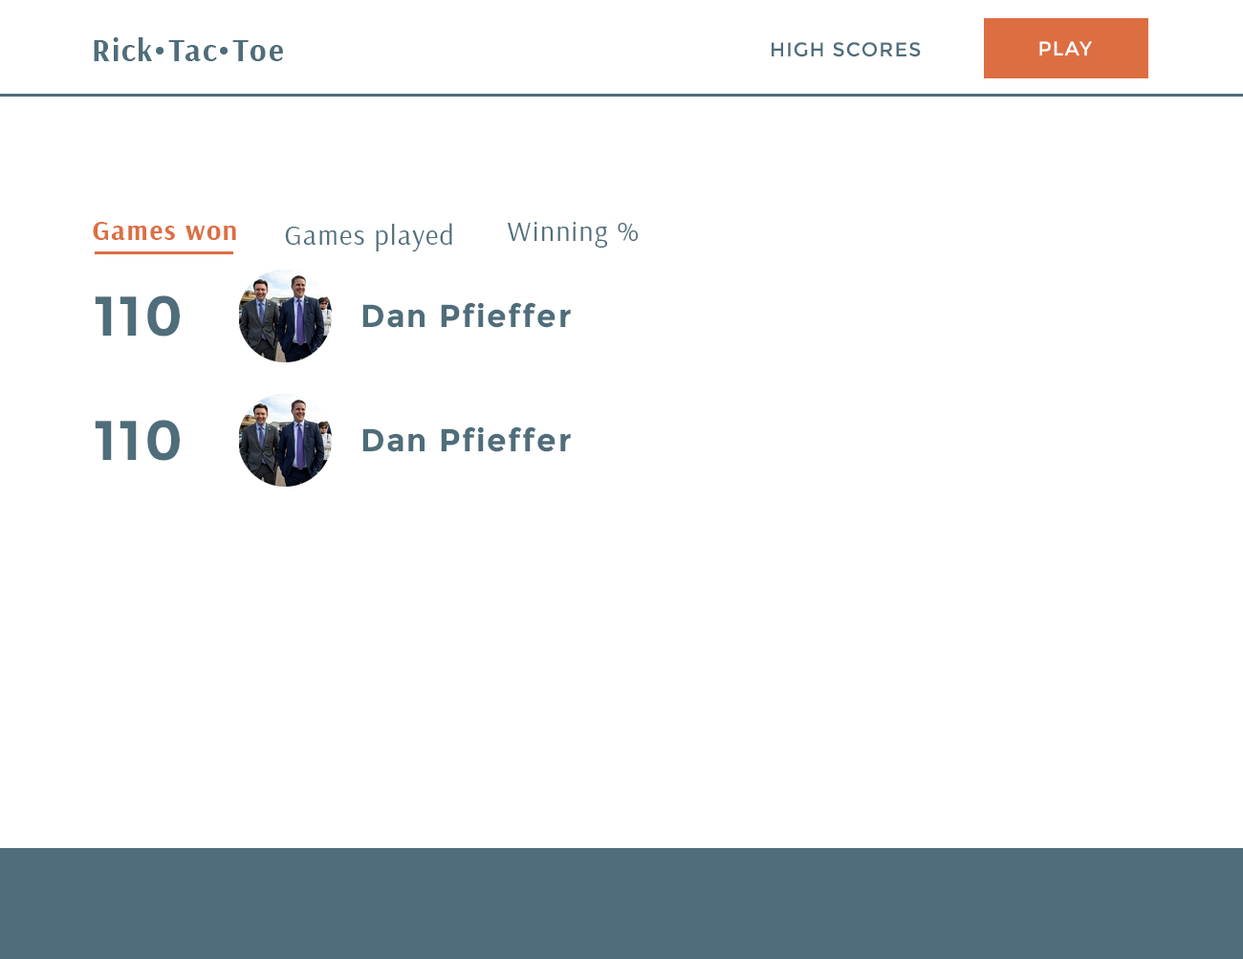
<style>
.page{position:relative;width:1243px;height:959px;background:#ffffff}
.page>*{position:absolute;margin:0}
.t1{font:31.9px "Arsenal-Bold";letter-spacing:0.05em;color:#4f6d7a}
.t2{font:19.9px "Montserrat-Regular";letter-spacing:0.05em;color:#ffffff}
.t3{font:19.9px "Montserrat-Regular";letter-spacing:0.05em;color:#4f6d7a}
.t4{font:27.9px "Arsenal-Bold";letter-spacing:0.05em;color:#dd6e42}
.t5{font:27.9px "Arsenal-Regular";letter-spacing:0.05em;color:#4f6d7a}
.t6{font:55.8px "Montserrat-Bold";letter-spacing:0.05em;color:#4f6d7a}
.t7{font:31.9px "Montserrat-Bold";letter-spacing:0.05em;color:#4f6d7a}
</style>
<div class="page">
<p class="t1" style="left:94px;top:37px;width:189px;height:24px">Rick•Tac•Toe</p>
<p class="t2" style="left:1039px;top:41px;width:53px;height:14px">PLAY</p>
<p class="t3" style="left:772px;top:42px;width:149px;height:15px">HIGH SCORES</p>
<p class="t4" style="left:93px;top:222px;width:143px;height:18px">Games won</p>
<p class="t5" style="left:507px;top:222px;width:132px;height:26px">Winning %</p>
<p class="t5" style="left:285px;top:223px;width:167px;height:29px">Games played</p>
<p class="t6" style="left:95px;top:295px;width:85px;height:42px">110</p>
<p class="t7" style="left:362px;top:302px;width:209px;height:26px">Dan Pfieffer</p>
<p class="t6" style="left:95px;top:420px;width:85px;height:41px">110</p>
<p class="t7" style="left:362px;top:427px;width:209px;height:25px">Dan Pfieffer</p>
</div>
